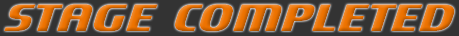
<style>
.page{position:relative;width:459px;height:36px;background:#333333}
.page>*{position:absolute;margin:0}
.t1{font:60px "Motorwerk"}
</style>
<div class="page">
<p class="t1" style="left:4px;top:4px;width:451px;height:28px">STAGE COMPLETED</p>
</div>
